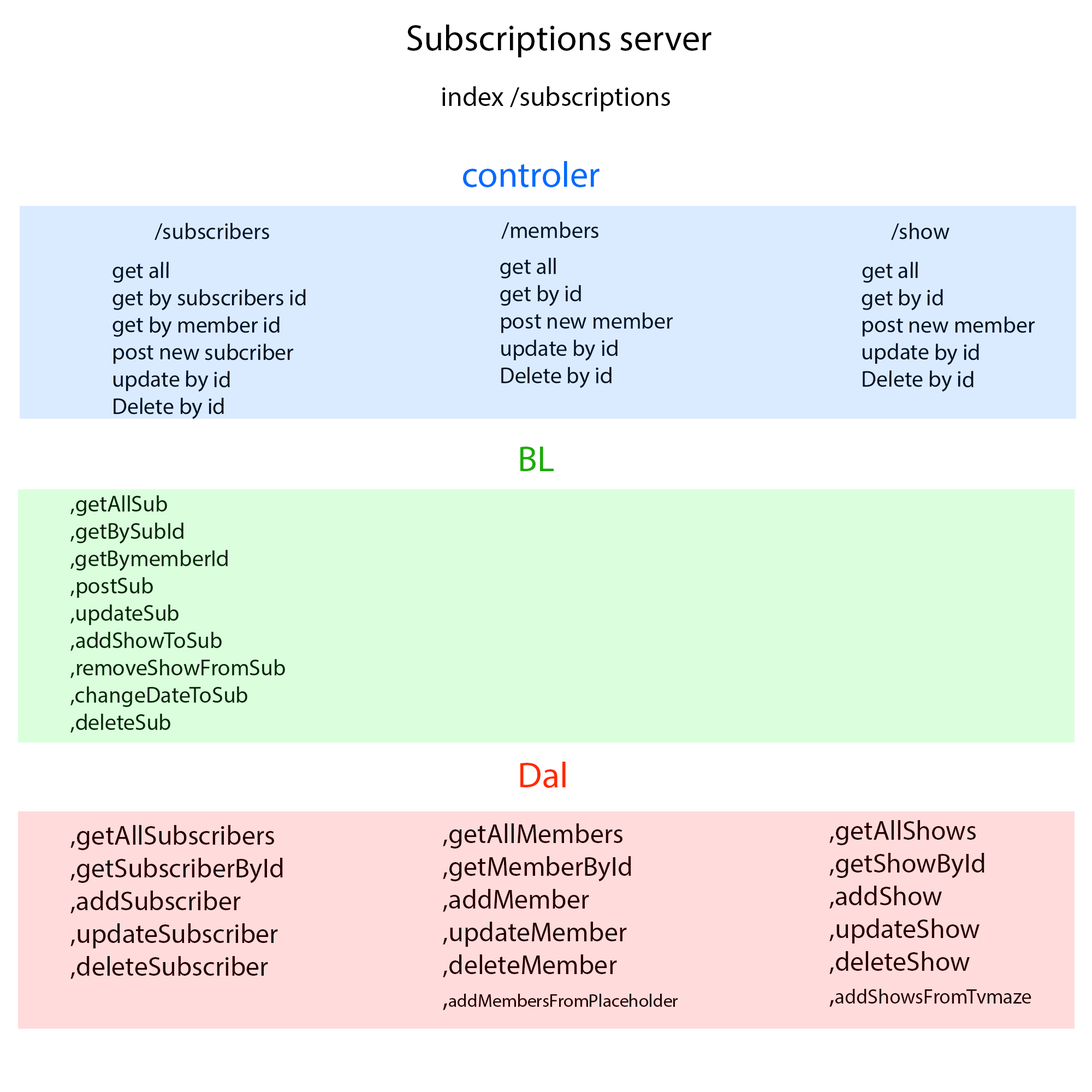
<style>
.page{position:relative;width:1092px;height:1092px;background:#ffffff}
.page>*{position:absolute;margin:0}
.t1{font:36.4px "MyriadHebrew-Regular";color:#000000}
.t2{font:6.6px "MyriadHebrew-Regular";color:#000000}
.t3{font:36.4px "MyriadHebrew-Regular";color:#006aff}
.t4{font:22.7px "MyriadHebrew-Regular";color:#001024}
.t5{font:36.4px "MyriadHebrew-Regular";color:#1bac07}
.t6{font:22.7px "MyriadHebrew-Regular";color:#002402}
.t7{font:36.4px "MyriadHebrew-Regular";color:#ff2a00}
.t8{font:6.6px "MyriadHebrew-Regular";color:#240000}
.t9{font:20.5px "MyriadHebrew-Regular";color:#240000}
.t10{font:27.3px "MyriadHebrew-Regular";color:#240000}
.t11{font:18.2px "MyriadHebrew-Regular";color:#240000}
</style>
<div class="page">
<p class="t1" style="left:407px;top:25px;width:304px;height:32px">Subscriptions server</p>
<p class="t2" style="left:442px;top:86px;width:228px;height:25px">index /subscriptions</p>
<p class="t3" style="left:463px;top:161px;width:137px;height:26px">controler</p>
<p class="t4" style="left:501px;top:222px;width:97px;height:17px">members/</p>
<p class="t4" style="left:155px;top:223px;width:114px;height:17px">subscribers/</p>
<p class="t4" style="left:891px;top:223px;width:58px;height:17px">show/</p>
<p class="t4" style="left:500px;top:258px;width:173px;height:130px;text-align:right">get all<br>get by id<br>post new member<br>update by id<br>Delete by id</p>
<p class="t4" style="left:112px;top:262px;width:194px;height:157px;text-align:right">get all<br>get by subscribers id<br>get by member id<br>post new subcriber<br>update by id<br>Delete by id</p>
<p class="t4" style="left:862px;top:262px;width:173px;height:130px;text-align:right">get all<br>get by id<br>post new member<br>update by id<br>Delete by id</p>
<p class="t5" style="left:520px;top:447px;width:34px;height:24px">BL</p>
<p class="t6" style="left:70px;top:495px;width:215px;height:238px;text-align:right">getAllSub,<br>  getBySubId,<br>  getBymemberId,<br>  postSub,<br>  updateSub,<br>  addShowToSub,<br>  removeShowFromSub,<br>  changeDateToSub,<br>  deleteSub,</p>
<p class="t7" style="left:520px;top:762px;width:46px;height:26px">Dal</p>
<p class="t8" style="left:829px;top:820px;width:202px;height:187px;text-align:right">getAllShows,<br>  getShowById,<br>  addShow,<br>  updateShow,<br>  deleteShow,<br>  <span class="t9">addShowsFromTvmaze</span>,</p>
<p class="t10" style="left:70px;top:825px;width:213px;height:154px;text-align:right">getAllSubscribers,<br>  getSubscriberById,<br>  addSubscriber,<br>  updateSubscriber,<br>  deleteSubscriber,</p>
<p class="t8" style="left:443px;top:823px;width:235px;height:187px;text-align:right">getAllMembers,<br>  getMemberById,<br>  addMember,<br>  updateMember,<br>  deleteMember,<br>  <span class="t11">addMembersFromPlaceholder</span>,</p>
</div>
